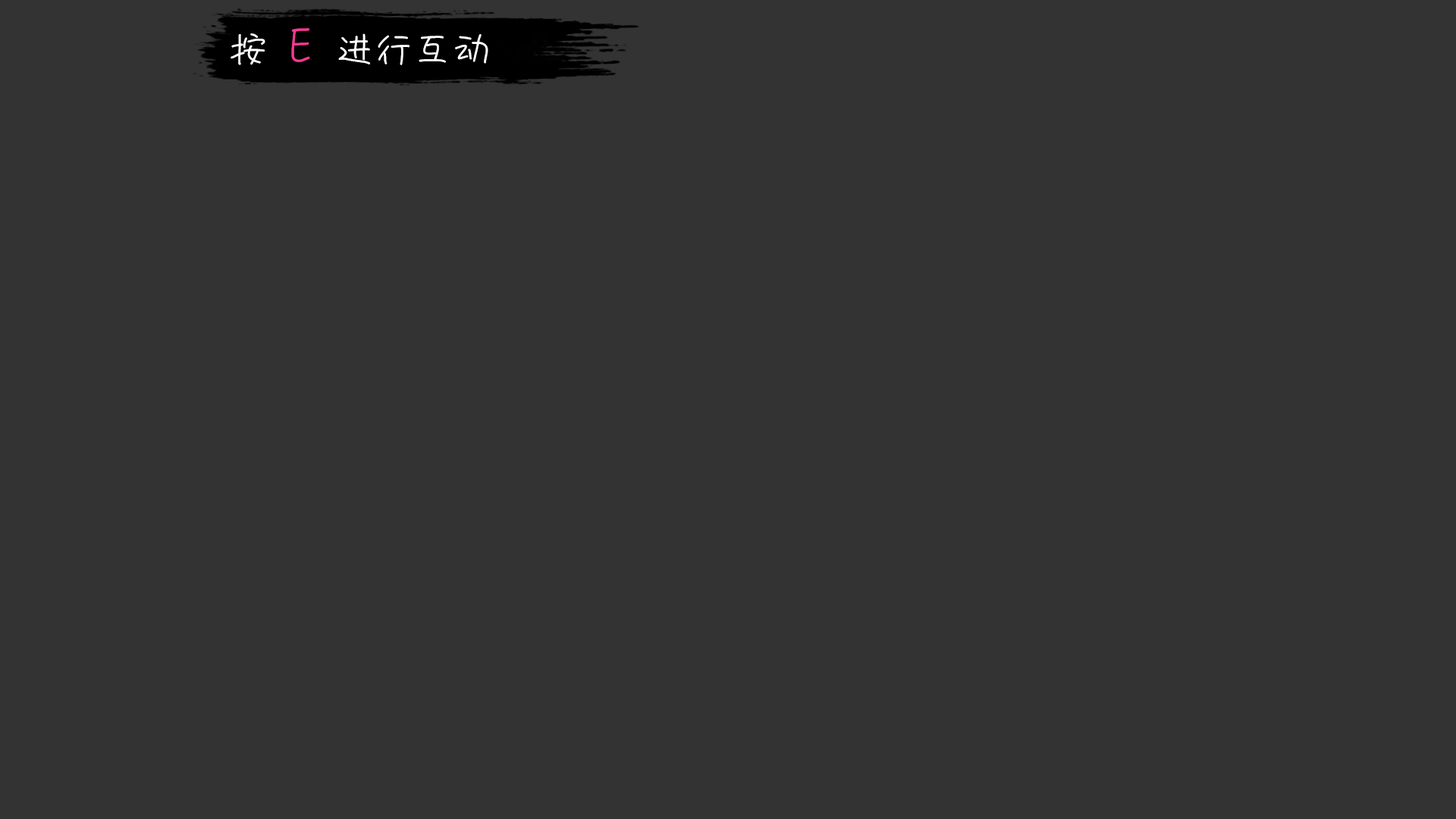
<style>
.page{position:relative;width:1456px;height:819px;background:#333333}
.page>*{position:absolute;margin:0}
.t1{font:35.2px "851tegakizatsu";letter-spacing:0.1em;color:#ffffff}
.t2{font:42px "851tegakizatsu";letter-spacing:0.1em;color:#f93893}
</style>
<div class="page">
<p class="t1" style="left:231px;top:28px;width:257px;height:37px">按 <span class="t2">E </span>进行互动</p>
</div>
